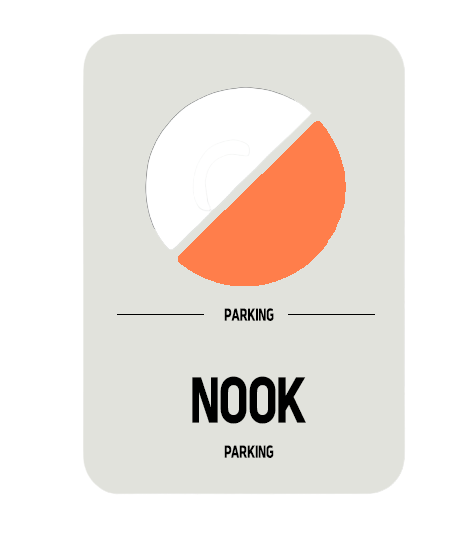
<style>
.page{position:relative;width:466px;height:535px;background:#ffffff}
.page>*{position:absolute;margin:0}
.t1{font:14px "JalnanGothic";letter-spacing:-0.02em;color:#000000}
.t2{font:51.8px "JalnanGothic";letter-spacing:-0.02em;color:#000000}
</style>
<div class="page">
<p class="t1" style="left:224px;top:308px;width:50px;height:13px">PARKING</p>
<p class="t2" style="left:192px;top:376px;width:114px;height:48px">NOOK</p>
<p class="t1" style="left:224px;top:445px;width:50px;height:13px">PARKING</p>
</div>
